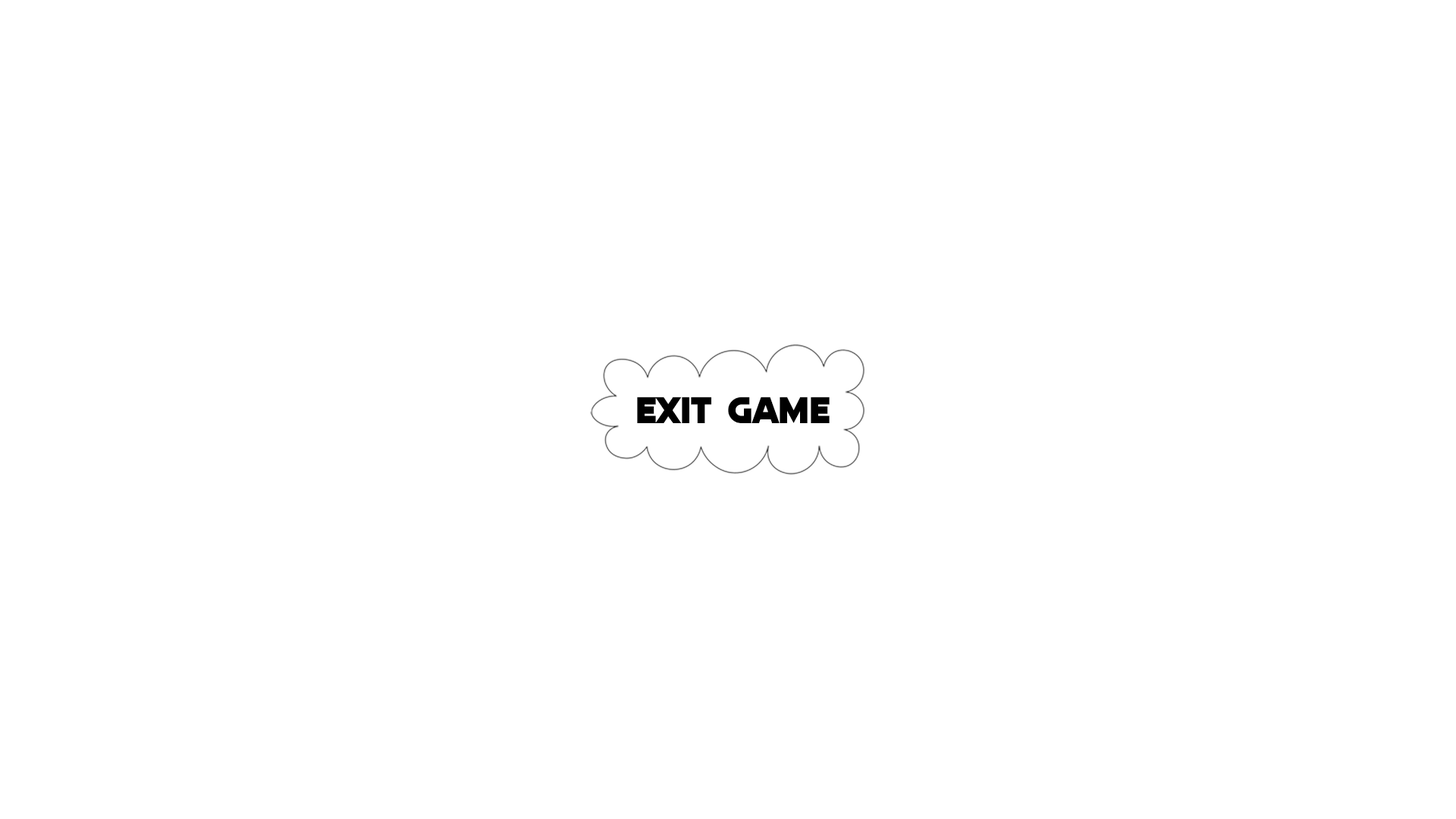
<style>
.page{position:relative;width:1456px;height:819px;background:#ffffff}
.page>*{position:absolute;margin:0}
.t1{font:37.9px "Quicksilver";color:#000000}
</style>
<div class="page">
<p class="t1" style="left:637px;top:397px;width:193px;height:26px">Exit Game</p>
</div>
